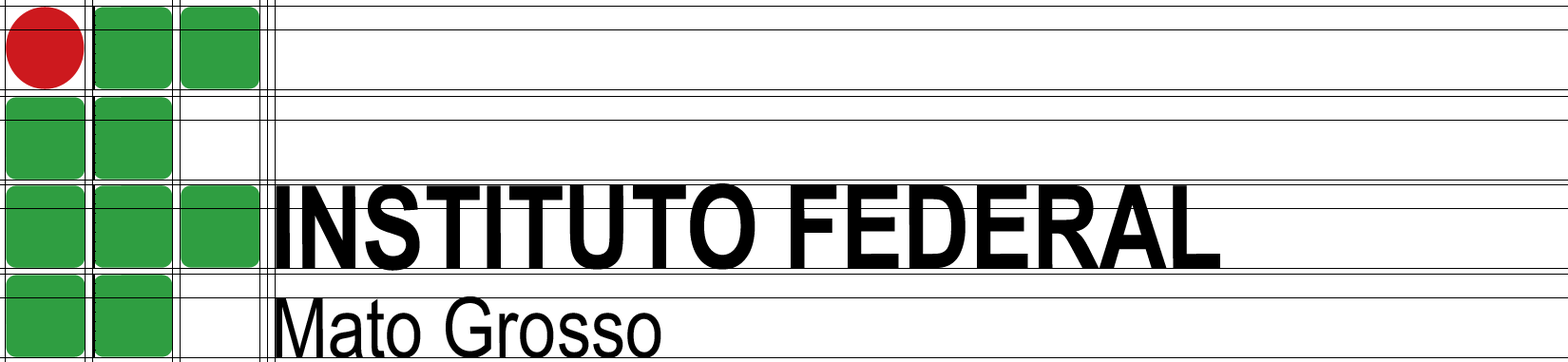
<style>
.page{position:relative;width:1568px;height:362px;background:#ffffff}
.page>*{position:absolute;margin:0}
.t1{font:115.9px "ArialNarrow-Bold";color:#000000}
.t2{font:83.6px "ArialNarrow";color:#000000}
</style>
<div class="page">
<p class="t1" style="left:276px;top:183px;width:944px;height:88px">INSTITUTO FEDERAL</p>
<p class="t2" style="left:276px;top:296px;width:385px;height:62px">Mato Grosso</p>
</div>
